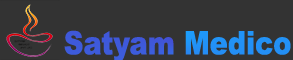
<style>
.page{position:relative;width:293px;height:60px;background:#333333}
.page>*{position:absolute;margin:0}
.t1{font:32.3px "Arial-Black";scale:0.84 1}
</style>
<div class="page">
<p class="t1" style="left:64px;top:30px;width:227px;height:32px">Satyam Medico</p>
</div>
